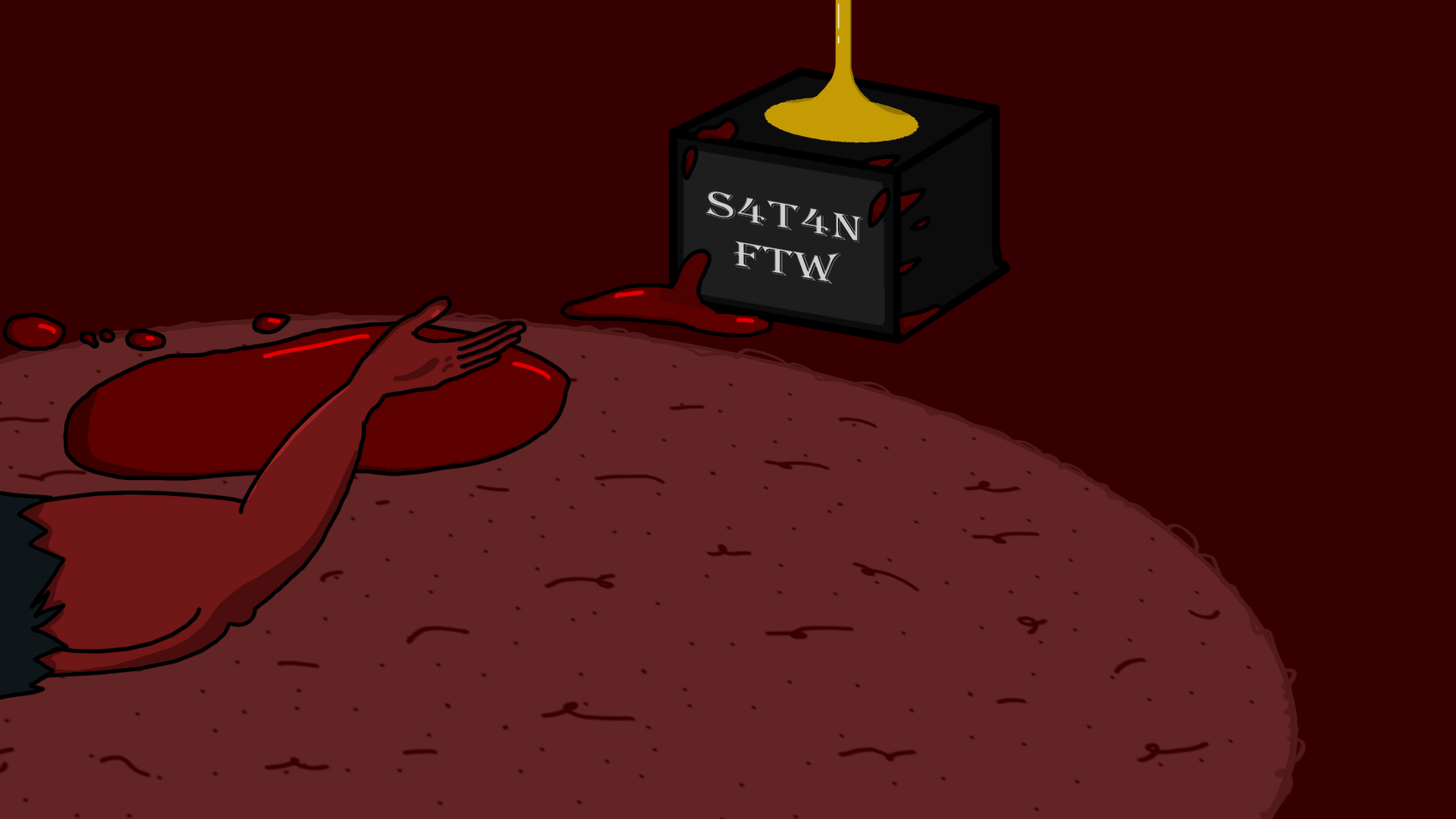
<style>
.page{position:relative;width:1456px;height:819px;background:#360000}
.page>*{position:absolute;margin:0}
.t1{font:38.4px "Algerian";color:#cfcfcf;scale:1.42 1}
</style>
<div class="page">
<p class="t1" style="left:705px;top:191px;width:159px;height:93px;text-align:center;rotate:10deg">S4T4N<br>FTW</p>
</div>
